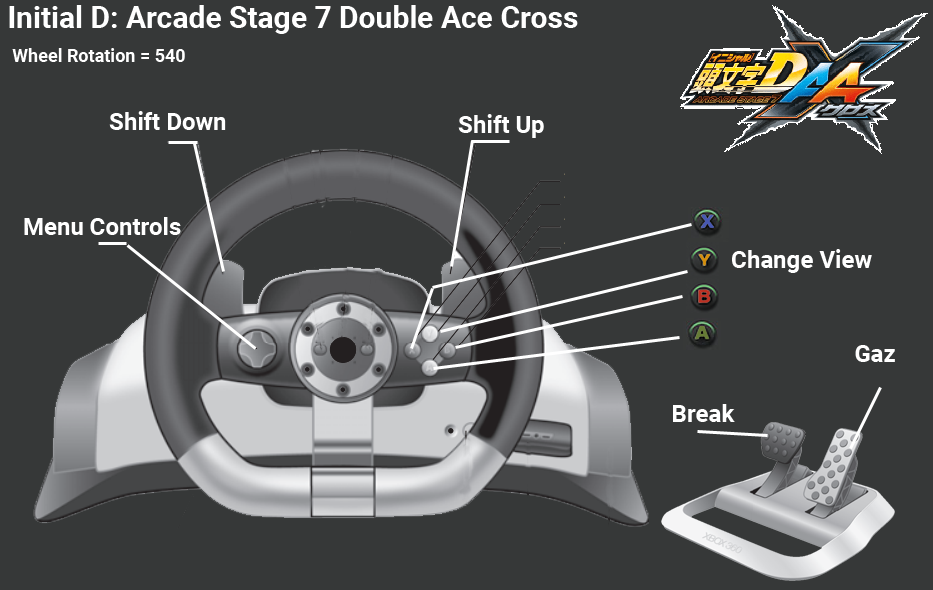
<style>
.page{position:relative;width:933px;height:590px;background:#363838}
.page>*{position:absolute;margin:0}
.t1{font:30px "Roboto-Bold";color:#ffffff}
.t2{font:18px "Roboto-Bold";color:#ffffff}
.t3{font:24px "Roboto-Bold";color:#ffffff}
</style>
<div class="page">
<p class="t1" style="left:9px;top:5px;width:569px;height:29px">Initial D: Arcade Stage 7 Double Ace Cross</p>
<p class="t2" style="left:12px;top:48px;width:173px;height:14px">Wheel Rotation = 540</p>
<p class="t3" style="left:109px;top:111px;width:117px;height:19px">Shift Down</p>
<p class="t3" style="left:458px;top:114px;width:86px;height:24px">Shift Up</p>
<p class="t3" style="left:24px;top:217px;width:157px;height:18px">Menu Controls</p>
<p class="t3" style="left:732px;top:249px;width:140px;height:24px">Change View</p>
<p class="t3" style="left:855px;top:345px;width:40px;height:17px">Gaz</p>
<p class="t3" style="left:673px;top:404px;width:62px;height:18px">Break</p>
</div>
